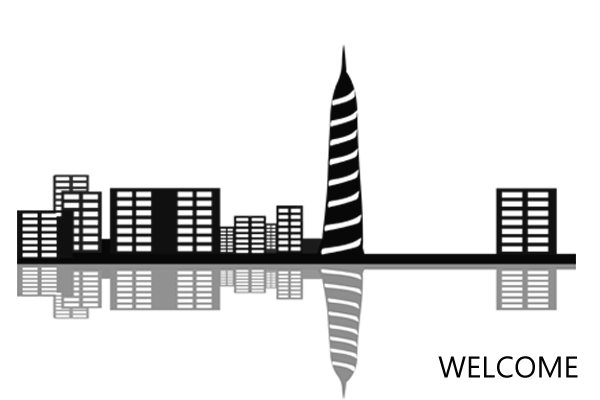
<style>
.page{position:relative;width:600px;height:400px;background:#ffffff}
.page>*{position:absolute;margin:0}
.t1{font:30px "SegoeUIHistoric";color:#040404}
</style>
<div class="page">
<p class="t1" style="left:438px;top:356px;width:140px;height:22px">WELCOME</p>
</div>
